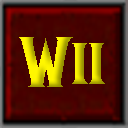
<style>
.page{position:relative;width:128px;height:128px}
.page>*{position:absolute;margin:0}
.t1{font:70.8px "LifeCraft"}
.t2{font:58.3px "LifeCraft"}
</style>
<div class="page">
<p class="t1" style="left:19px;top:37px;width:54px;height:50px">W</p>
<p class="t2" style="left:72px;top:43px;width:33px;height:41px">II</p>
</div>
